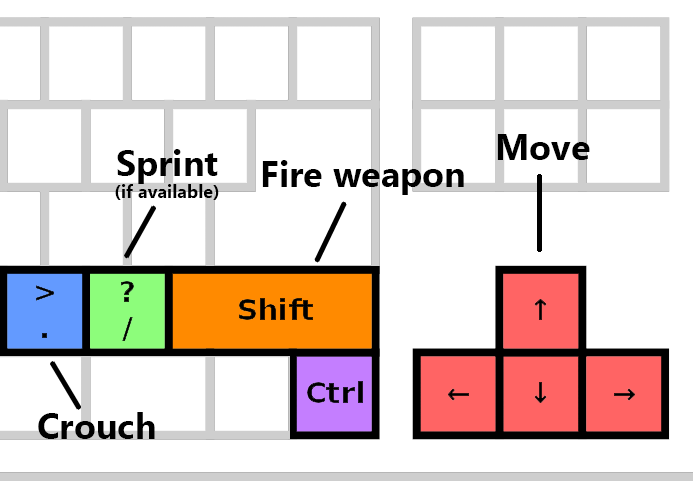
<style>
.page{position:relative;width:693px;height:481px;background:#ffffff}
.page>*{position:absolute;margin:0}
.t1{font:36px "MyanmarText-Bold";color:#000000}
.t2{font:18px "MyanmarText-Bold";color:#000000}
</style>
<div class="page">
<p class="t1" style="left:497px;top:134px;width:93px;height:26px">Move</p>
<p class="t2" style="left:115px;top:149px;width:104px;height:51px;text-align:center"><span class="t1">Sprint<br></span>(if available)</p>
<p class="t1" style="left:262px;top:160px;width:202px;height:35px">Fire weapon</p>
<p class="t1" style="left:38px;top:412px;width:117px;height:27px">Crouch</p>
</div>
